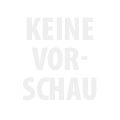
<style>
.page{position:relative;width:120px;height:120px;background:#ffffff}
.page>*{position:absolute;margin:0}
.t1{font:33.3px/30px "MyriadPro-BlackCond";color:#efefef;text-transform:uppercase}
</style>
<div class="page">
<p class="t1" style="left:22px;top:17px;width:75px;height:84px;text-align:center">KEINE<br>VOR-<br>SCHAU</p>
</div>
